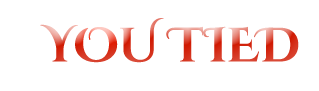
<style>
.page{position:relative;width:319px;height:91px;background:#ffffff}
.page>*{position:absolute;margin:0}
.t1{font:48px "CinzelDecorative-Bold"}
</style>
<div class="page">
<p class="t1" style="left:40px;top:18px;width:259px;height:45px">YOU TIED</p>
</div>
